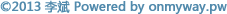
<style>
.page{position:relative;width:227px;height:14px;background:#ffffff}
.page>*{position:absolute;margin:0}
.t1{font:12px "MicrosoftYaHei";color:#518aac;font-weight:bold}
</style>
<div class="page">
<p class="t1" style="left:0px;top:0px;width:227px;height:14px">©2013 李斌 Powered by onmyway.pw</p>
</div>
